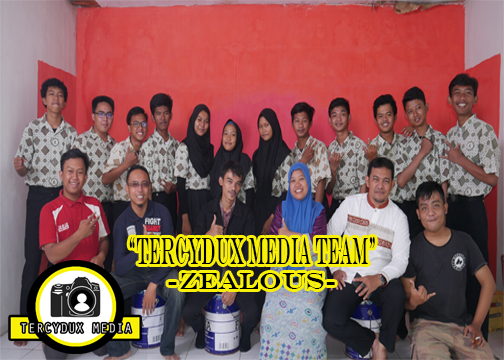
<style>
.page{position:relative;width:504px;height:360px}
.page>*{position:absolute;margin:0}
.t1{font:38.5px "EngraversMT";color:#000000;scale:0.37 1}
.t2{font:24.4px "EngraversMT";color:#000000}
</style>
<div class="page">
<p class="t1" style="left:129px;top:237px;width:246px;height:27px">“TERCYDUX MEDIA TEAM”</p>
<p class="t2" style="left:168px;top:273px;width:167px;height:16px">-zealous-</p>
</div>
